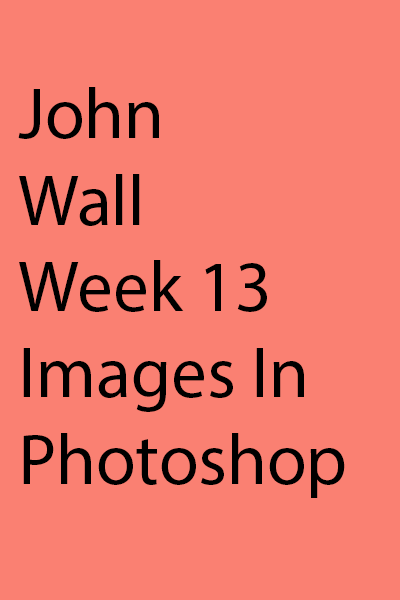
<style>
.page{position:relative;width:400px;height:600px;background:#fa8072}
.page>*{position:absolute;margin:0}
.t1{font:72px "MyriadPro-Regular";color:#000000}
</style>
<div class="page">
<p class="t1" style="left:18px;top:87px;width:327px;height:411px">John<br>Wall<br>Week 13<br>Images In<br>Photoshop</p>
</div>
